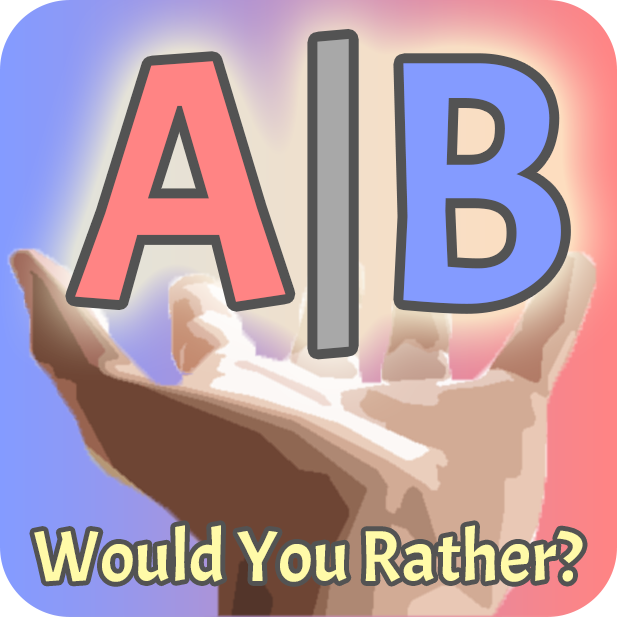
<style>
.page{position:relative;width:617px;height:617px}
.page>*{position:absolute;margin:0}
.t1{font:72px "Acme-Regular";color:#fffaa8}
</style>
<div class="page">
<p class="t1" style="left:34px;top:525px;width:549px;height:57px">Would You Rather?</p>
</div>
